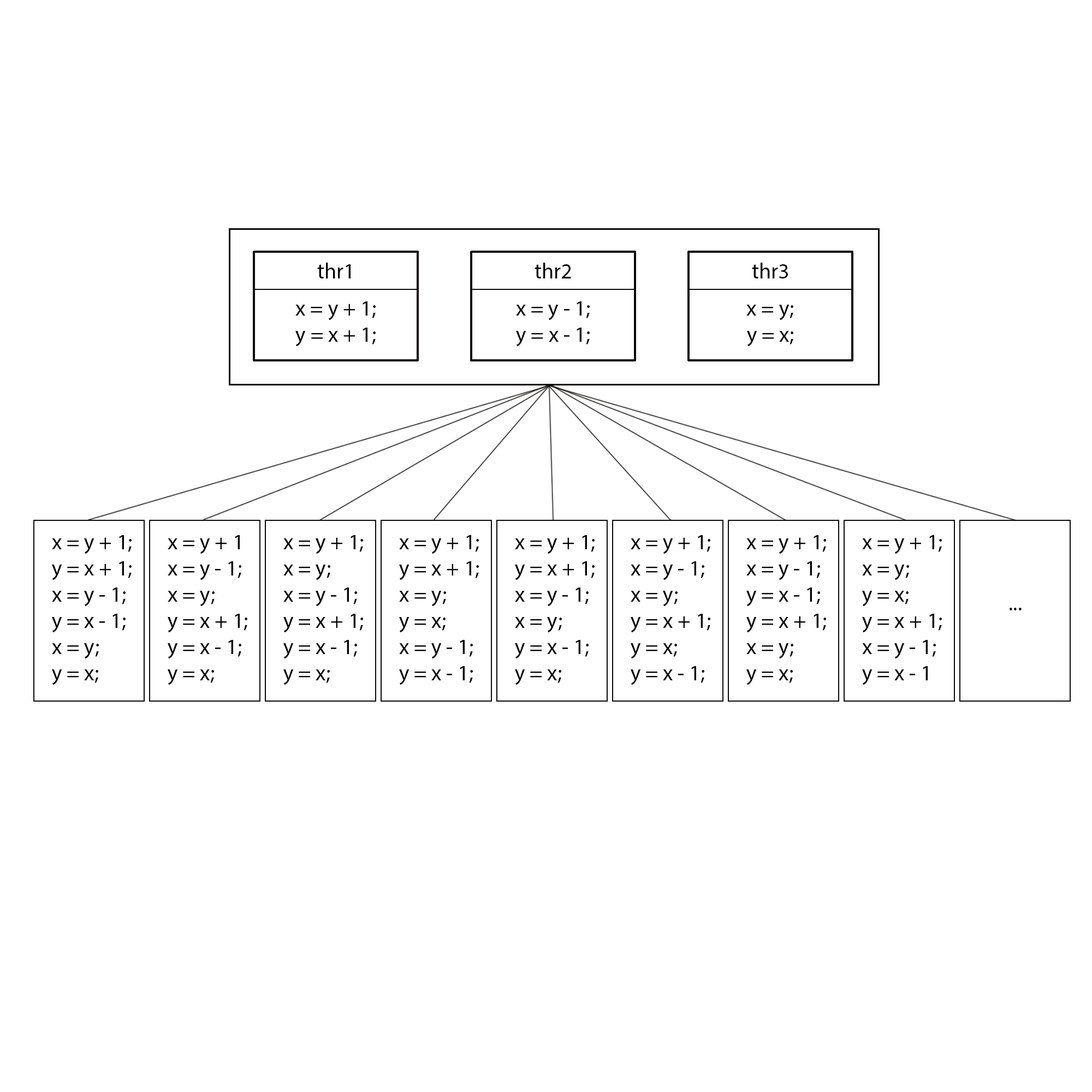
<style>
.page{position:relative;width:1092px;height:1092px;background:#ffffff}
.page>*{position:absolute;margin:0}
.t1{font:21.8px "MyriadPro-Regular";color:#000000}
</style>
<div class="page">
<p class="t1" style="left:317px;top:263px;width:34px;height:15px">thr1</p>
<p class="t1" style="left:535px;top:263px;width:36px;height:15px">thr2</p>
<p class="t1" style="left:752px;top:263px;width:36px;height:15px">thr3</p>
<p class="t1" style="left:295px;top:301px;width:81px;height:46px;text-align:center">x = y + 1;<br>y = x + 1;</p>
<p class="t1" style="left:516px;top:301px;width:74px;height:46px;text-align:center">x = y - 1;<br>y = x - 1;</p>
<p class="t1" style="left:746px;top:305px;width:47px;height:42px;text-align:center">x = y;<br>y = x;</p>
<p class="t1" style="left:52px;top:535px;width:80px;height:150px">x = y + 1;<br>y = x + 1;<br>x = y - 1;<br>y = x - 1;<br>x = y;<br>y = x;</p>
<p class="t1" style="left:168px;top:535px;width:79px;height:150px">x = y + 1<br>x = y - 1;<br>x = y;<br>y = x + 1;<br>y = x - 1;<br>y = x;</p>
<p class="t1" style="left:283px;top:535px;width:80px;height:150px">x = y + 1;<br>x = y;<br>x = y - 1;<br>y = x + 1;<br>y = x - 1;<br>y = x;</p>
<p class="t1" style="left:399px;top:535px;width:80px;height:150px">x = y + 1;<br>y = x + 1;<br>x = y;<br>y = x;<br>x = y - 1;<br>y = x - 1;</p>
<p class="t1" style="left:515px;top:535px;width:80px;height:150px">x = y + 1;<br>y = x + 1;<br>x = y - 1;<br>x = y;<br>y = x - 1;<br>y = x;</p>
<p class="t1" style="left:631px;top:535px;width:79px;height:150px">x = y + 1;<br>x = y - 1;<br>x = y;<br>y = x + 1;<br>y = x;<br>y = x - 1;</p>
<p class="t1" style="left:746px;top:535px;width:80px;height:150px">x = y + 1;<br>x = y - 1;<br>y = x - 1;<br>y = x + 1;<br>x = y;<br>y = x;</p>
<p class="t1" style="left:862px;top:535px;width:80px;height:150px">x = y + 1;<br>x = y;<br>y = x;<br>y = x + 1;<br>x = y - 1;<br>y = x - 1</p>
<p class="t1" style="left:1010px;top:608px;width:12px;height:2px">...</p>
</div>
